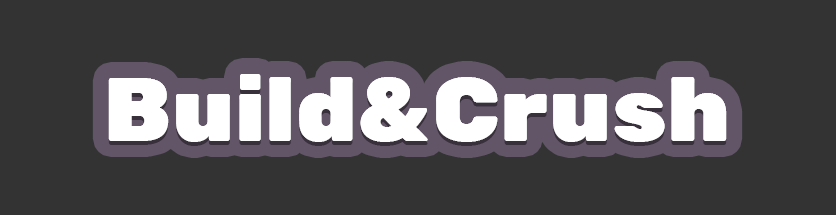
<style>
.page{position:relative;width:836px;height:215px;background:#333333}
.page>*{position:absolute;margin:0}
.t1{font:91.3px "RubikOne-Regular";color:#ffffff}
</style>
<div class="page">
<p class="t1" style="left:108px;top:74px;width:619px;height:68px">Build&amp;Crush</p>
<p class="t1" style="left:108px;top:74px;width:619px;height:68px">Build&amp;Crush</p>
</div>
